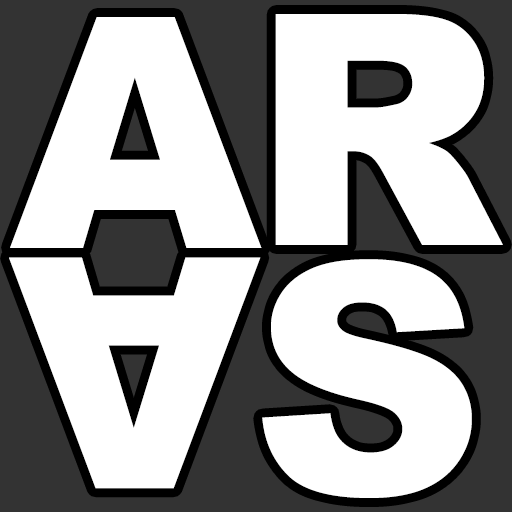
<style>
.page{position:relative;width:512px;height:512px;background:#ffffff}
.page>*{position:absolute;margin:0}
.t1{font:322.3px "Arial-Black";color:#ffffff}
.t2{font:322.3px/249.2px "Arial-Black";color:#ffffff}
</style>
<div class="page">
<p class="t1" style="left:10px;top:17px;width:252px;height:231px">A</p>
<p class="t2" style="left:262px;top:14px;width:241px;height:484px">R<br>S</p>
<p class="t1" style="left:9px;top:257px;width:252px;height:232px">A</p>
</div>
